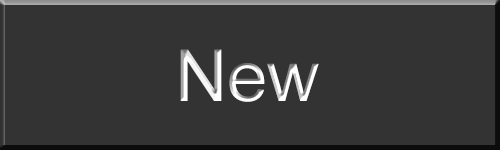
<style>
.page{position:relative;width:500px;height:150px;background:#333333}
.page>*{position:absolute;margin:0}
.t1{font:72px "ArialMT";color:#ffffff}
</style>
<div class="page">
<p class="t1" style="left:180px;top:49px;width:139px;height:53px">New</p>
</div>
